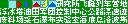
<style>
.page{position:relative;width:128px;height:24px;background:#008c00}
.page>*{position:absolute;margin:0}
.t1{font:8px/8px "Zfull-GB";color:#ffffff}
.t2{font:8px "GuanZhi";color:#ffffff}
.t3{font:8px "GuanZhi"}
</style>
<div class="page">
<p class="t1" style="left:0px;top:0px;width:127px;height:23px">研究所飞艇列车营地<br>浮冰塔油田军团控制中心公路漂遗迹<br>废料场采　瀑布实验室海底乌洛波斯</p>
<p class="t2" style="left:32px;top:16px;width:7px;height:7px">石</p>
<p class="t3" style="left:33px;top:16px;width:7px;height:7px">石</p>
</div>
